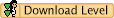
<style>
.page{position:relative;width:114px;height:18px;background:#fbd894}
.page>*{position:absolute;margin:0}
.t1{font:12px "LucidaSansUnicode";letter-spacing:-0.025em;color:#000000;scale:0.97 1}
</style>
<div class="page">
<p class="t1" style="left:24px;top:5px;width:84px;height:10px">Download Level</p>
</div>
